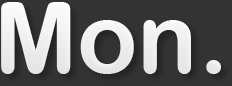
<style>
.page{position:relative;width:232px;height:86px;background:#333333}
.page>*{position:absolute;margin:0}
.t1{font:100px "ArialRoundedMTBold";color:#ffffff}
</style>
<div class="page">
<p class="t1" style="left:1px;top:2px;width:220px;height:72px">Mon.</p>
</div>
